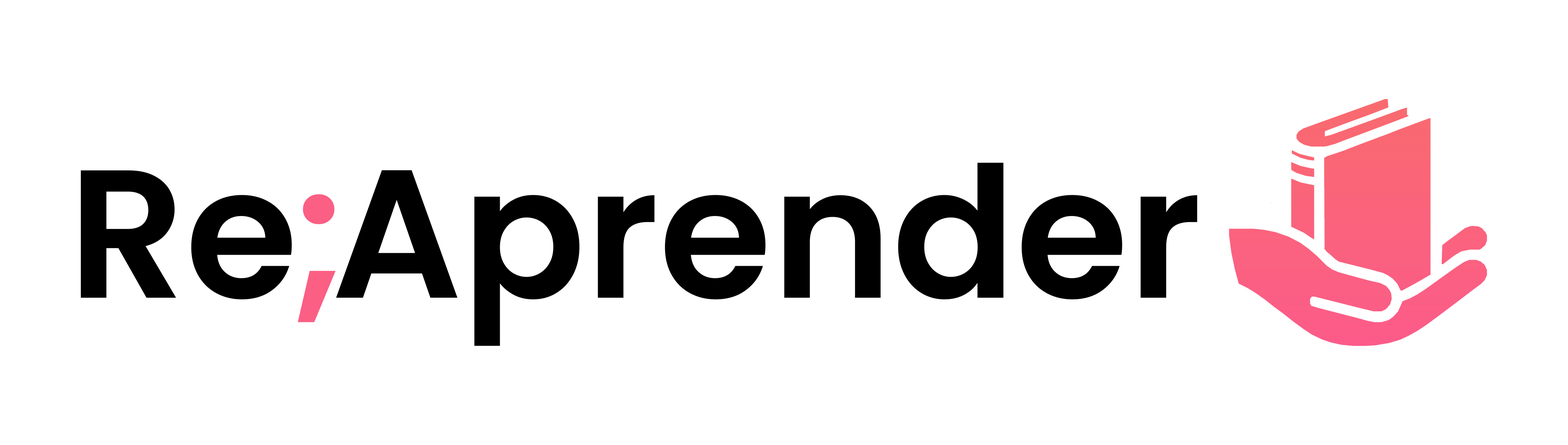
<style>
.page{position:relative;width:1568px;height:445px;background:#ffffff}
.page>*{position:absolute;margin:0}
.t1{font:182.3px "Poppins-SemiBold";color:#000000}
.t2{font:182.3px "Poppins-SemiBold";letter-spacing:-0.04em;color:#000000}
.t3{font:182.3px "Poppins-SemiBold";letter-spacing:-0.1em;color:#fb5f83}
</style>
<div class="page">
<p class="t1" style="left:81px;top:163px;width:1116px;height:183px">R<span class="t2">e</span><span class="t3">;</span>Aprender</p>
</div>
